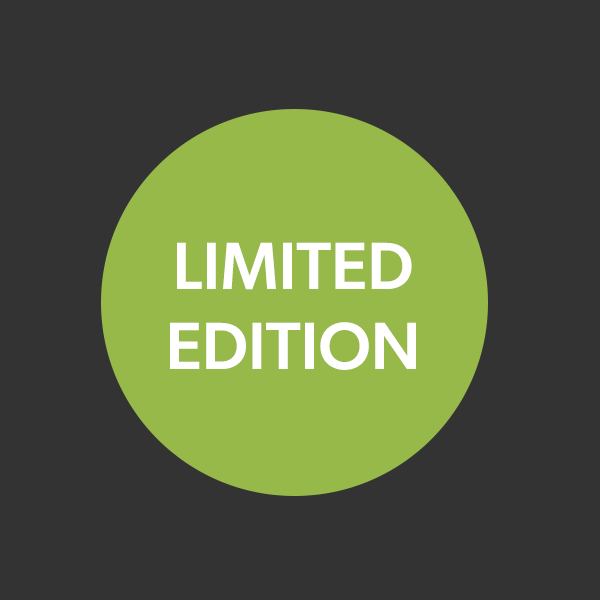
<style>
.page{position:relative;width:600px;height:600px;background:#333333}
.page>*{position:absolute;margin:0}
.t1{font:66.7px "Gibson-Medium";color:#ffffff}
</style>
<div class="page">
<p class="t1" style="left:170px;top:242px;width:246px;height:128px;text-align:center">LIMITED EDITION</p>
</div>
